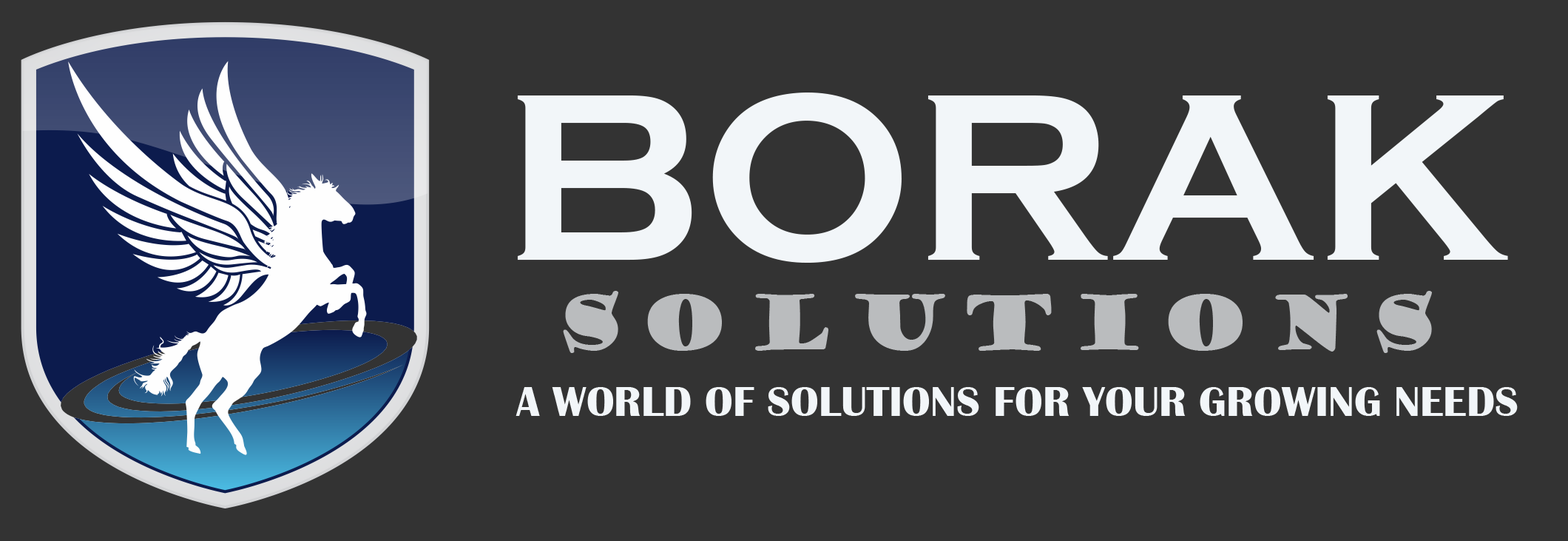
<style>
.page{position:relative;width:1568px;height:541px;background:#333333}
.page>*{position:absolute;margin:0}
.t1{font:246.5px "CopperplateGothic-Bold";color:#f2f6f9}
.t2{font:74px "GoudyStout";letter-spacing:0.2em;color:#babcbe}
.t3{font:43.1px "BritannicBold";color:#f2f6f9}
</style>
<div class="page">
<p class="t1" style="left:517px;top:92px;width:991px;height:171px">BORAK</p>
<p class="t2" style="left:563px;top:291px;width:869px;height:62px">SOLUTIONS</p>
<p class="t3" style="left:516px;top:387px;width:1002px;height:29px">A WORLD OF SOLUTIONS FOR YOUR GROWING NEEDS</p>
</div>
